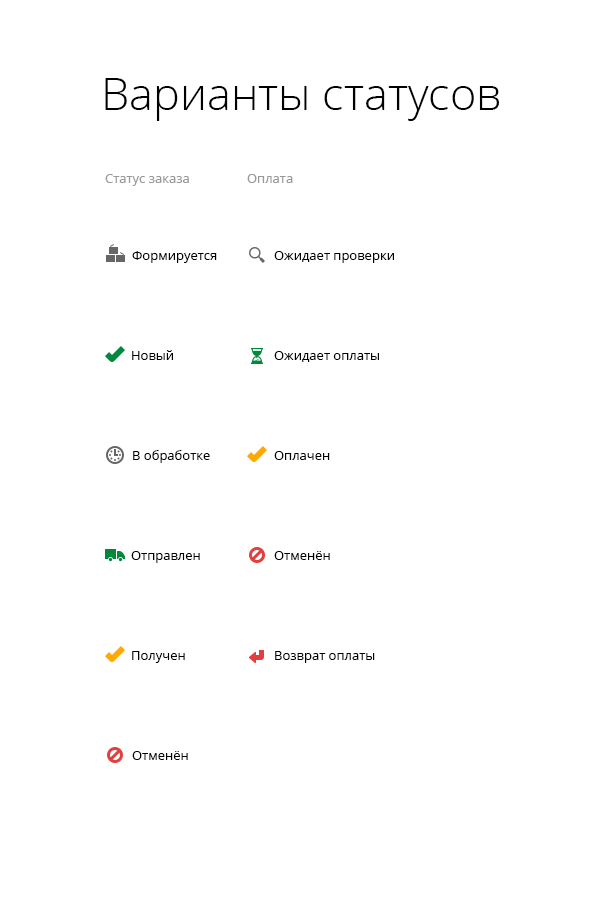
<style>
.page{position:relative;width:600px;height:900px;background:#ffffff}
.page>*{position:absolute;margin:0}
.t1{font:45px "OpenSans-Light";color:#000000}
.t2{font:13px "OpenSans";color:#999999}
.t3{font:13px "OpenSans";color:#000000}
</style>
<div class="page">
<p class="t1" style="left:105px;top:78px;width:395px;height:43px">Варианты статусов</p>
<p class="t2" style="left:105px;top:174px;width:84px;height:12px">Статус заказа</p>
<p class="t2" style="left:247px;top:174px;width:46px;height:9px">Оплата</p>
<p class="t3" style="left:132px;top:251px;width:85px;height:12px">Формируется</p>
<p class="t3" style="left:274px;top:251px;width:120px;height:12px">Ожидает проверки</p>
<p class="t3" style="left:132px;top:350px;width:41px;height:10px">Новый</p>
<p class="t3" style="left:274px;top:351px;width:105px;height:11px">Ожидает оплаты</p>
<p class="t3" style="left:133px;top:450px;width:77px;height:13px">В обработке</p>
<p class="t3" style="left:274px;top:451px;width:56px;height:9px">Оплачен</p>
<p class="t3" style="left:131px;top:551px;width:69px;height:12px">Отправлен</p>
<p class="t3" style="left:274px;top:551px;width:56px;height:9px">Отменён</p>
<p class="t3" style="left:132px;top:651px;width:53px;height:12px">Получен</p>
<p class="t3" style="left:275px;top:651px;width:100px;height:12px">Возврат оплаты</p>
<p class="t3" style="left:132px;top:751px;width:56px;height:9px">Отменён</p>
</div>
